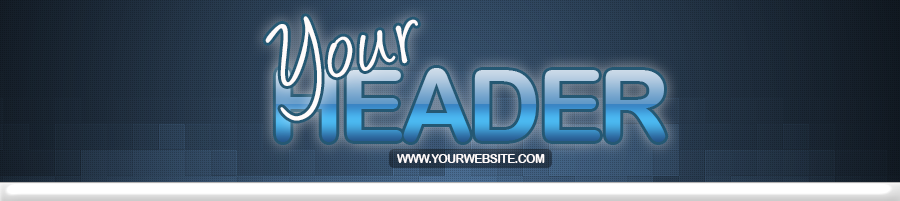
<style>
.page{position:relative;width:900px;height:201px}
.page>*{position:absolute;margin:0}
.t1{font:100px "Angelina";color:#fffbfb}
.t2{font:100px "ArialRoundedMTBold";letter-spacing:-0.05em;text-transform:uppercase}
.t3{font:12px "ArialRoundedMTBold";letter-spacing:-0.05em;color:#fffbfb;text-transform:uppercase}
</style>
<div class="page">
<p class="t1" style="left:265px;top:16px;width:153px;height:105px;rotate:-11deg">Your</p>
<p class="t2" style="left:275px;top:68px;width:391px;height:74px">Header</p>
<p class="t3" style="left:397px;top:154px;width:148px;height:9px">www.yourwebsite.com</p>
</div>
